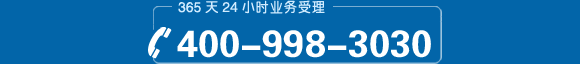
<style>
.page{position:relative;width:580px;height:64px;background:#0265a9}
.page>*{position:absolute;margin:0}
.t1{font:14px "CTZhongYuanSJ";color:#d1ecff}
.t2{font:38px "FZDHTJW--GB1-0";color:#ffffff}
</style>
<div class="page">
<p class="t1" style="left:178px;top:0px;width:147px;height:14px">365天24小时业务受理</p>
<p class="t2" style="left:177px;top:30px;width:254px;height:28px">400-998-3030</p>
</div>
